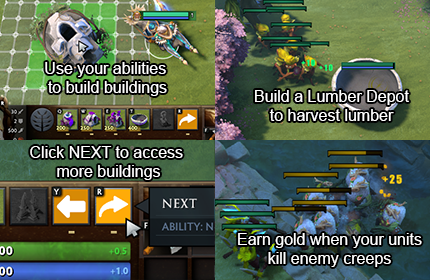
<style>
.page{position:relative;width:430px;height:280px}
.page>*{position:absolute;margin:0}
.t1{font:16px "ArialMT";color:#ffffff}
</style>
<div class="page">
<p class="t1" style="left:45px;top:62px;width:122px;height:34px;text-align:center">Use your abilities <br>to build buildings</p>
<p class="t1" style="left:255px;top:90px;width:154px;height:31px;text-align:center">Build a Lumber Depot<br>to harvest lumber</p>
<p class="t1" style="left:30px;top:146px;width:153px;height:34px;text-align:center">Click NEXT to access <br>more buildings</p>
<p class="t1" style="left:238px;top:233px;width:184px;height:34px;text-align:center">Earn gold when your units<br>kill enemy creeps</p>
</div>
